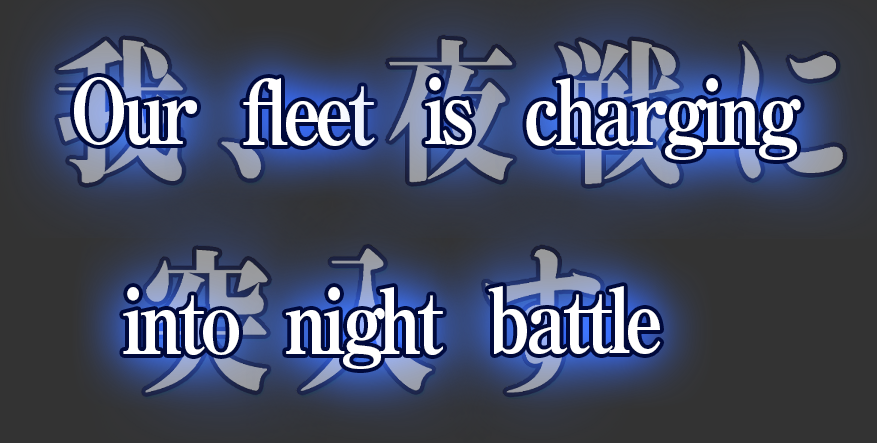
<style>
.page{position:relative;width:877px;height:443px}
.page>*{position:absolute;margin:0}
.t1{font:90px "RyuminPro-ExBold";letter-spacing:-0.08em;color:#ffffff;scale:0.85 1}
</style>
<div class="page">
<p class="t1" style="left:74px;top:77px;width:123px;height:68px">Our</p>
<p class="t1" style="left:243px;top:78px;width:132px;height:68px">fleet</p>
<p class="t1" style="left:425px;top:77px;width:47px;height:68px">is</p>
<p class="t1" style="left:526px;top:78px;width:141px;height:68px">char</p>
<p class="t1" style="left:665px;top:78px;width:136px;height:82px">ging</p>
<p class="t1" style="left:123px;top:287px;width:116px;height:68px">into</p>
<p class="t1" style="left:285px;top:287px;width:158px;height:82px">night</p>
<p class="t1" style="left:488px;top:286px;width:173px;height:68px">battle</p>
</div>
